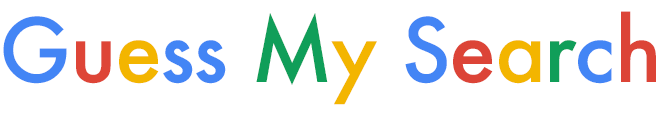
<style>
.page{position:relative;width:660px;height:113px;background:#ffffff}
.page>*{position:absolute;margin:0}
.t1{font:85.5px "Futura-Medium";letter-spacing:-0.02em;color:#4385f5}
.t2{font:85.5px "Futura-Medium";letter-spacing:-0.02em;color:#de4537}
.t3{font:85.5px "Futura-Medium";letter-spacing:-0.02em;color:#f3b500}
.t4{font:85.5px "Futura-Medium";letter-spacing:-0.02em;color:#109e59}
.t5{font:85.5px "Futura-Medium";letter-spacing:-0.02em;color:#dc4437}
</style>
<div class="page">
<p class="t1" style="left:3px;top:11px;width:653px;height:94px">G<span class="t2">u</span><span class="t3">e</span>ss <span class="t4">M</span><span class="t3">y </span>S<span class="t5">e</span><span class="t3">a</span><span class="t4">r</span>c<span class="t5">h</span></p>
</div>
